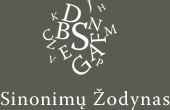
<style>
.page{position:relative;width:170px;height:110px;background:#5b5b51}
.page>*{position:absolute;margin:0}
.t1{font:19.6px "WarnockPro-Regular";letter-spacing:0.05em;color:#ffffff}
</style>
<div class="page">
<p class="t1" style="left:0px;top:88px;width:170px;height:22px">Sinonimų Žodynas</p>
</div>
